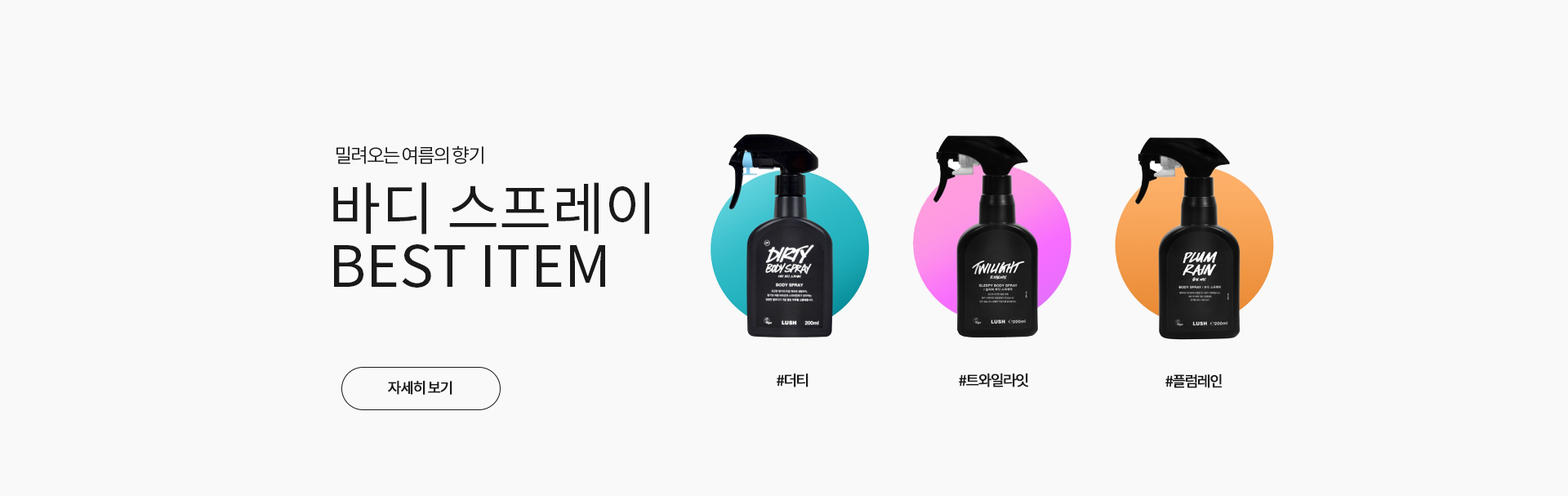
<style>
.page{position:relative;width:1568px;height:496px;background:#f9f9f9}
.page>*{position:absolute;margin:0}
.t1{font:19.6px "NotoSansKR-Regular";letter-spacing:-0.1em;color:#191919}
.t2{font:57.2px/57.2px "NotoSansKR-Regular";color:#191919}
.t3{font:14.7px "NotoSansKR-Regular";letter-spacing:-0.1em;color:#191919;font-weight:bold}
</style>
<div class="page">
<p class="t1" style="left:336px;top:145px;width:147px;height:19px">밀려오는 여름의 향기</p>
<p class="t2" style="left:333px;top:182px;width:316px;height:105px">바디 스프레이 <br>BEST ITEM</p>
<p class="t3" style="left:777px;top:373px;width:31px;height:14px">#더티</p>
<p class="t3" style="left:959px;top:373px;width:69px;height:14px">#트와일라잇</p>
<p class="t3" style="left:1165px;top:373px;width:57px;height:15px">#플럼레인</p>
<p class="t3" style="left:388px;top:381px;width:64px;height:13px">자세히 보기</p>
</div>
